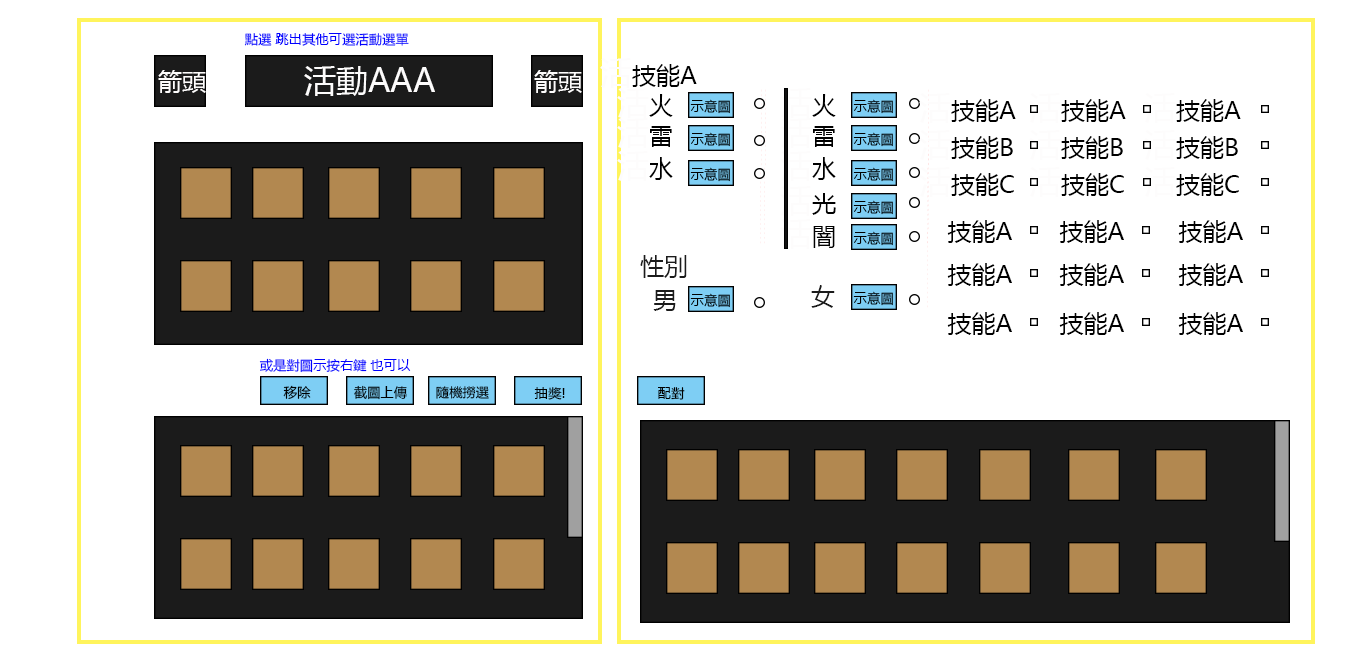
<style>
.page{position:relative;width:1367px;height:672px;background:#ffffff}
.page>*{position:absolute;margin:0}
.t1{font:13.3px "MicrosoftYaHei";color:#0000ff}
.t2{font:24px "MicrosoftYaHei";color:#000000}
.t3{font:32px "MicrosoftYaHei";color:#fdfcfc}
.t4{font:24px "MicrosoftYaHei";color:#fdfcfc}
.t5{font:13.3px "MicrosoftYaHei";color:#000000}
.t6{font:24px "MicrosoftYaHei";color:#1b1b1b}
</style>
<div class="page">
<p class="t1" style="left:244px;top:33px;width:165px;height:13px">點選 跳出其他可選活動選單</p>
<p class="t2" style="left:600px;top:58px;width:97px;height:30px"><span class="t3">活</span>技能A</p>
<p class="t4" style="left:158px;top:70px;width:48px;height:23px">箭頭</p>
<p class="t3" style="left:304px;top:66px;width:131px;height:30px">活動AAA</p>
<p class="t4" style="left:534px;top:70px;width:48px;height:23px">箭頭</p>
<p class="t3" style="left:617px;top:88px;width:56px;height:30px">活<span class="t2">火</span></p>
<p class="t3" style="left:780px;top:88px;width:56px;height:30px">活<span class="t2">火</span></p>
<p class="t5" style="left:690px;top:99px;width:40px;height:15px">示意圖</p>
<p class="t5" style="left:853px;top:99px;width:40px;height:15px">示意圖</p>
<p class="t2" style="left:919px;top:93px;width:97px;height:30px"><span class="t3">活</span>技能A</p>
<p class="t2" style="left:1029px;top:93px;width:97px;height:30px"><span class="t3">活</span>技能A</p>
<p class="t2" style="left:1144px;top:93px;width:97px;height:30px"><span class="t3">活</span>技能A</p>
<p class="t3" style="left:617px;top:118px;width:55px;height:30px">活<span class="t2">雷</span></p>
<p class="t3" style="left:780px;top:118px;width:55px;height:30px">活<span class="t2">雷</span></p>
<p class="t5" style="left:690px;top:132px;width:40px;height:15px">示意圖</p>
<p class="t5" style="left:853px;top:132px;width:40px;height:15px">示意圖</p>
<p class="t2" style="left:919px;top:130px;width:94px;height:30px"><span class="t3">活</span>技能B</p>
<p class="t2" style="left:1029px;top:130px;width:94px;height:30px"><span class="t3">活</span>技能B</p>
<p class="t2" style="left:1144px;top:130px;width:94px;height:30px"><span class="t3">活</span>技能B</p>
<p class="t3" style="left:617px;top:151px;width:56px;height:30px">活<span class="t2">水</span></p>
<p class="t3" style="left:780px;top:151px;width:56px;height:30px">活<span class="t2">水</span></p>
<p class="t5" style="left:690px;top:167px;width:40px;height:15px">示意圖</p>
<p class="t5" style="left:853px;top:167px;width:40px;height:15px">示意圖</p>
<p class="t2" style="left:919px;top:167px;width:95px;height:30px"><span class="t3">活</span>技能C</p>
<p class="t2" style="left:1029px;top:167px;width:95px;height:30px"><span class="t3">活</span>技能C</p>
<p class="t2" style="left:1144px;top:167px;width:95px;height:30px"><span class="t3">活</span>技能C</p>
<p class="t3" style="left:780px;top:186px;width:56px;height:30px">活<span class="t2">光</span></p>
<p class="t5" style="left:853px;top:200px;width:40px;height:15px">示意圖</p>
<p class="t3" style="left:780px;top:219px;width:55px;height:30px">活<span class="t2">闇</span></p>
<p class="t2" style="left:947px;top:220px;width:65px;height:23px"><span class="t3">   </span>技能A</p>
<p class="t2" style="left:1059px;top:220px;width:65px;height:23px"><span class="t3">   </span>技能A</p>
<p class="t2" style="left:1178px;top:220px;width:65px;height:23px"><span class="t3">   </span>技能A</p>
<p class="t5" style="left:853px;top:231px;width:40px;height:15px">示意圖</p>
<p class="t6" style="left:640px;top:255px;width:47px;height:23px">性別</p>
<p class="t2" style="left:947px;top:263px;width:65px;height:23px"><span class="t3">   </span>技能A</p>
<p class="t2" style="left:1059px;top:263px;width:65px;height:23px"><span class="t3">   </span>技能A</p>
<p class="t2" style="left:1178px;top:263px;width:65px;height:23px"><span class="t3">   </span>技能A</p>
<p class="t6" style="left:653px;top:290px;width:23px;height:21px">男</p>
<p class="t5" style="left:690px;top:293px;width:40px;height:15px">示意圖</p>
<p class="t6" style="left:811px;top:285px;width:24px;height:23px">女</p>
<p class="t5" style="left:853px;top:291px;width:40px;height:15px">示意圖</p>
<p class="t2" style="left:947px;top:312px;width:65px;height:23px"><span class="t3">   </span>技能A</p>
<p class="t2" style="left:1059px;top:312px;width:65px;height:23px"><span class="t3">   </span>技能A</p>
<p class="t2" style="left:1178px;top:312px;width:65px;height:23px"><span class="t3">   </span>技能A</p>
<p class="t1" style="left:259px;top:358px;width:152px;height:15px">或是對圖示按右鍵 也可以</p>
<p class="t5" style="left:283px;top:385px;width:28px;height:14px">移除</p>
<p class="t5" style="left:354px;top:385px;width:53px;height:15px">截圖上傳</p>
<p class="t5" style="left:436px;top:386px;width:53px;height:13px">隨機撈選</p>
<p class="t5" style="left:534px;top:387px;width:31px;height:13px">抽獎!</p>
<p class="t5" style="left:658px;top:387px;width:27px;height:13px">配對</p>
</div>
